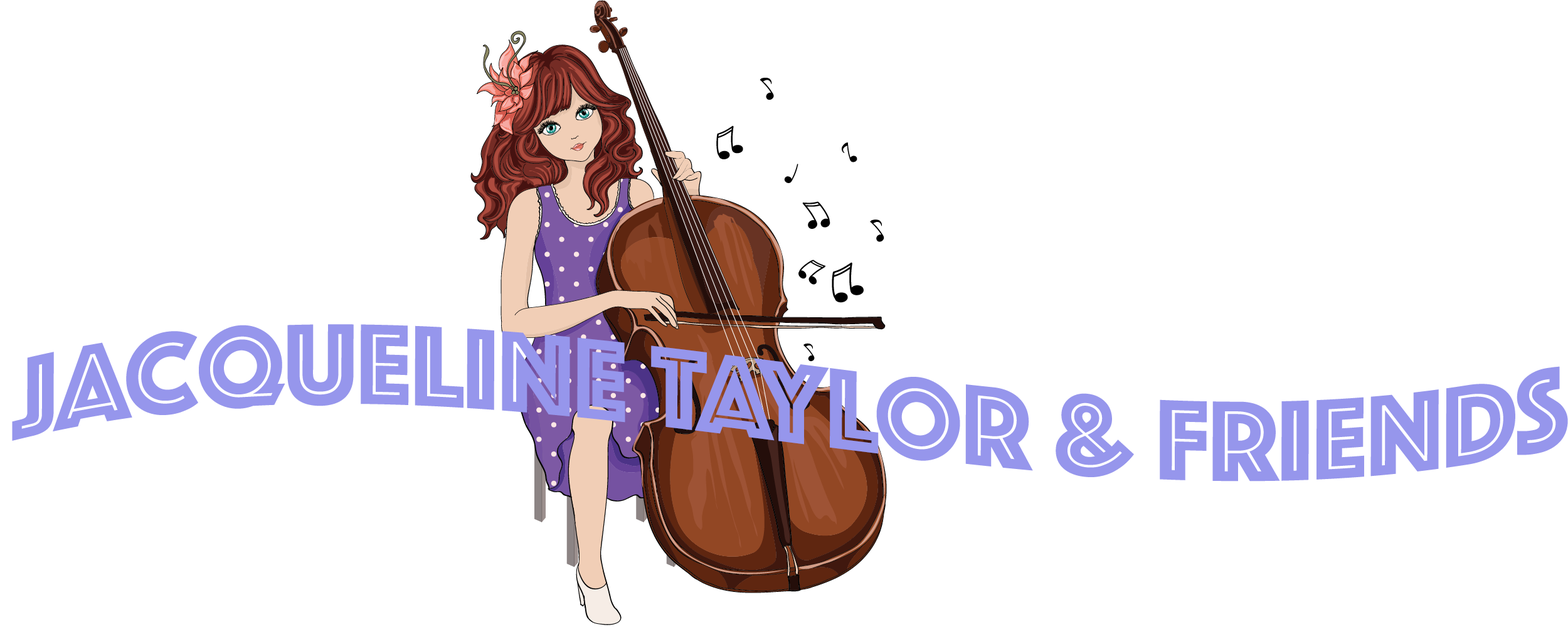
<style>
.page{position:relative;width:1568px;height:627px;background:#ffffff}
.page>*{position:absolute;margin:0}
.t1{font:118.1px "Phosphate-Inline";color:#9696ec}
</style>
<div class="page">
<p class="t1" style="left:12px;top:324px;width:1556px;height:158px">JACQUELINE TAYLOR &amp; FRIENDS</p>
</div>
